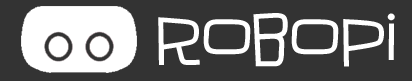
<style>
.page{position:relative;width:412px;height:81px;background:#333333}
.page>*{position:absolute;margin:0}
.t1{font:75px "IguanaLoverBTN";color:#ffffff}
</style>
<div class="page">
<p class="t1" style="left:158px;top:13px;width:237px;height:54px">RoboPi</p>
</div>
